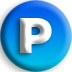
<style>
.page{position:relative;width:72px;height:72px}
.page>*{position:absolute;margin:0}
.t1{font:49.4px "Montserrat-Black"}
</style>
<div class="page">
<p class="t1" style="left:20px;top:18px;width:32px;height:35px">P</p>
</div>
